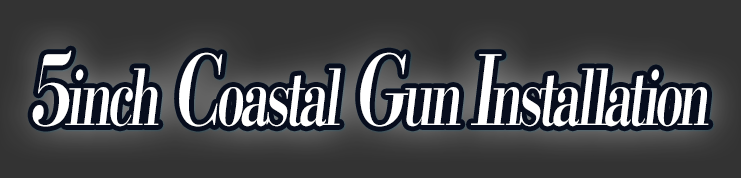
<style>
.page{position:relative;width:741px;height:178px;background:#333333}
.page>*{position:absolute;margin:0}
.t1{font:76.8px "KochoStd-Heavy";letter-spacing:-0.08em;color:#ffffff;font-style:italic;scale:0.68 1}
.t2{font:96px "KochoStd-Heavy";letter-spacing:-0.08em;color:#ffffff;font-style:italic;scale:0.68 1}
</style>
<div class="page">
<p class="t1" style="left:32px;top:50px;width:677px;height:77px"><span class="t2">5</span>inch<span class="t2"> C</span>oastal<span class="t2"> G</span>un <span class="t2">I</span>nstallation</p>
</div>
